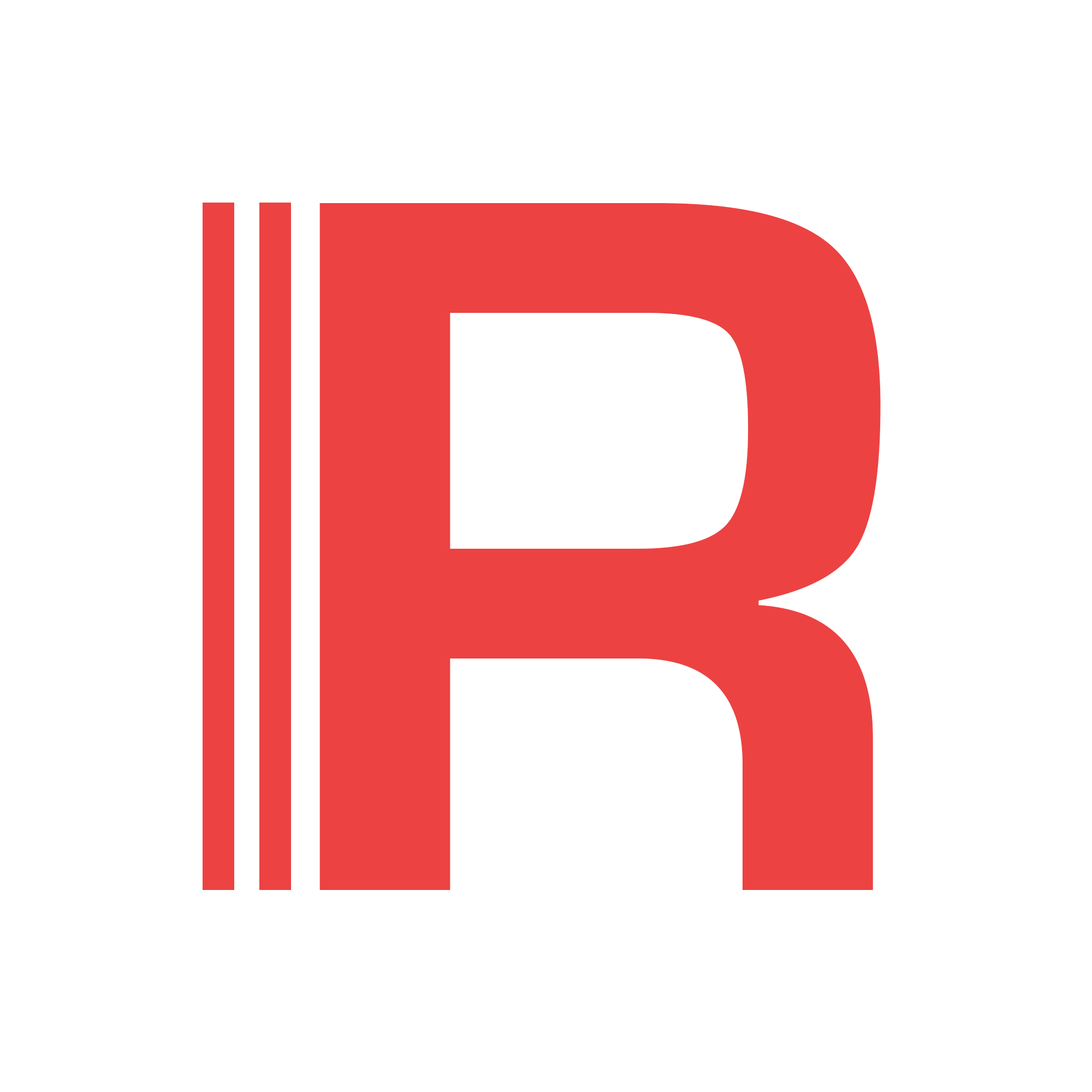
<style>
.page{position:relative;width:1092px;height:1092px;background:#ffffff}
.page>*{position:absolute;margin:0}
.t1{font:1030.9px "EurostileBold";color:#ec4242}
</style>
<div class="page">
<p class="t1" style="left:319px;top:203px;width:562px;height:687px">R</p>
</div>
